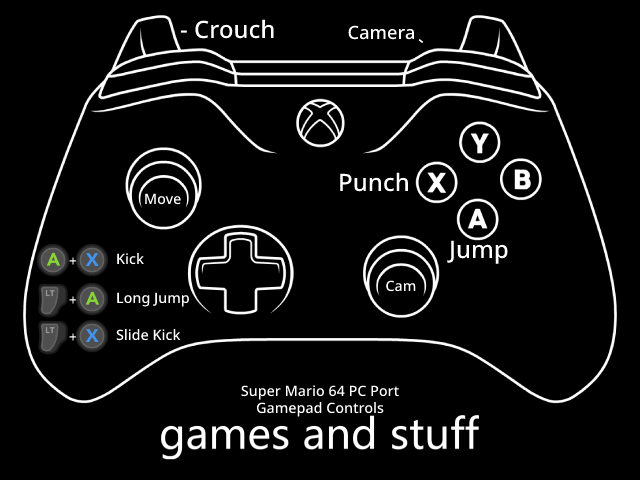
<style>
.page{position:relative;width:640px;height:480px;background:#000000}
.page>*{position:absolute;margin:0}
.t1{font:24px "NotoSans-Medium";color:#ffffff}
.t2{font:14.3px "NotoSans-Medium";color:#ffffff}
.t3{font:14.3px "NotoSans-Medium"}
</style>
<div class="page">
<p class="t1" style="left:180px;top:19px;width:94px;height:20px">- Crouch</p>
<p class="t1" style="left:340px;top:172px;width:68px;height:20px">Punch</p>
<p class="t2" style="left:145px;top:193px;width:36px;height:12px">Move</p>
<p class="t1" style="left:447px;top:240px;width:61px;height:24px">Jump</p>
<p class="t3" style="left:69px;top:257px;width:8px;height:8px">+</p>
<p class="t2" style="left:117px;top:253px;width:27px;height:12px">Kick</p>
<p class="t2" style="left:386px;top:280px;width:30px;height:12px">Cam</p>
<p class="t2" style="left:117px;top:292px;width:72px;height:15px">Long Jump</p>
<p class="t3" style="left:69px;top:296px;width:8px;height:8px">+</p>
<p class="t2" style="left:116px;top:329px;width:65px;height:12px">Slide Kick</p>
<p class="t3" style="left:69px;top:333px;width:8px;height:8px">+</p>
<p class="t2" style="left:241px;top:385px;width:158px;height:32px;text-align:center">Super Mario 64 PC Port<br>Gamepad Controls</p>
</div>
